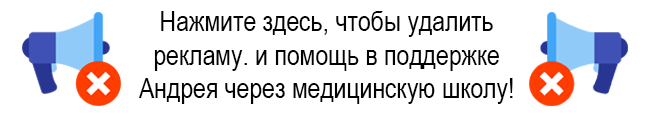
<style>
.page{position:relative;width:650px;height:115px;background:#ffffff}
.page>*{position:absolute;margin:0}
.t1{font:28px "ArialNarrow";color:#030303}
</style>
<div class="page">
<p class="t1" style="left:139px;top:11px;width:374px;height:93px;text-align:center">Нажмите здесь, чтобы удалить <br>рекламу. и помощь в поддержке <br>Андрея через медицинскую школу!</p>
</div>
